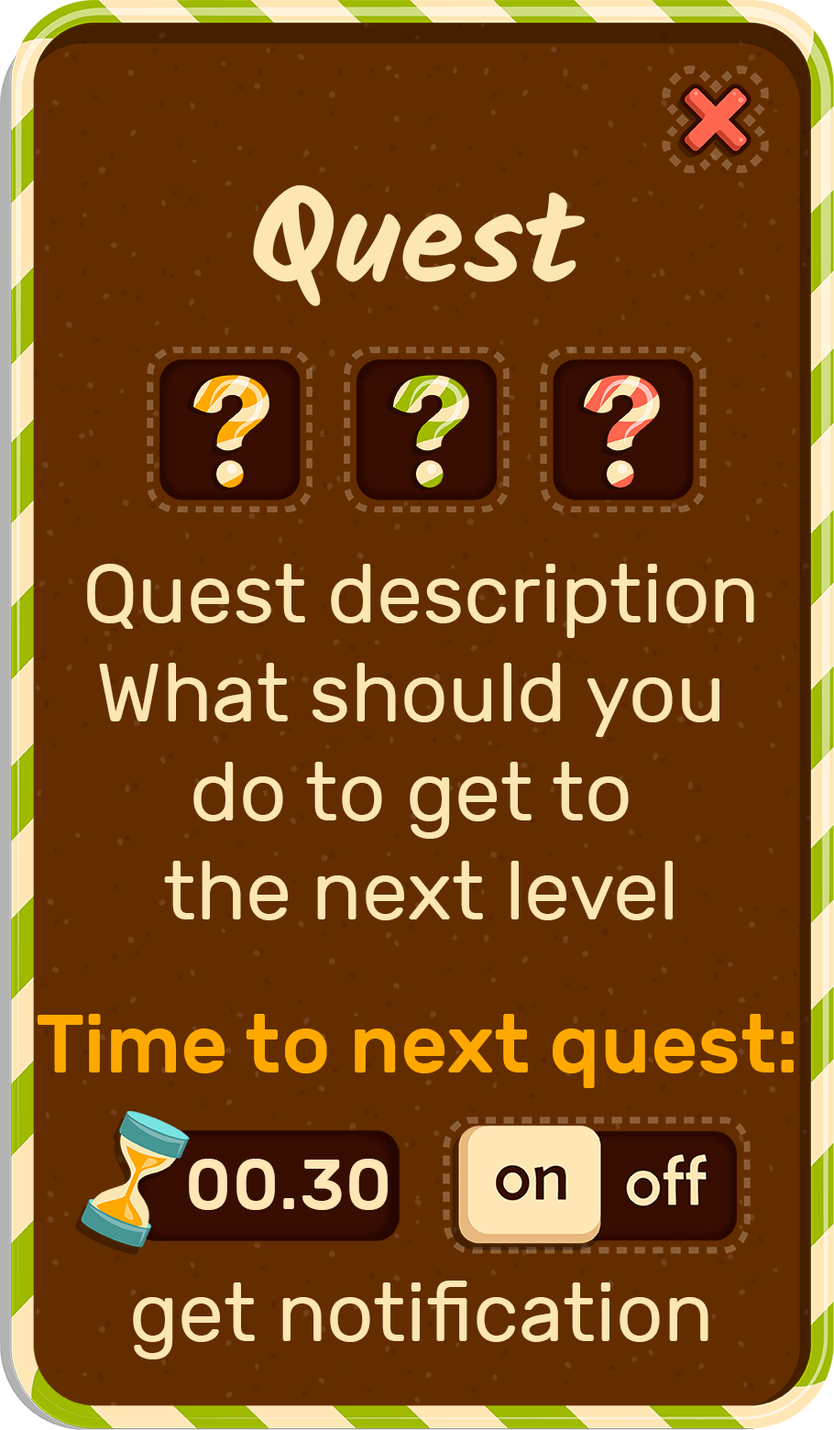
<style>
.page{position:relative;width:834px;height:1430px;background:#632d00}
.page>*{position:absolute;margin:0}
.t1{font:130.9px "Kalam-Bold";color:#fce6b2}
.t2{font:82.5px "Rubik-Regular";color:#fce6b2}
.t3{font:82.5px "Rubik-Medium";color:#ffa900}
.t4{font:70.3px "Rubik-Medium";letter-spacing:0.025em;color:#ffe6b5}
</style>
<div class="page">
<p class="t1" style="left:253px;top:185px;width:332px;height:121px">Quest</p>
<p class="t2" style="left:87px;top:564px;width:667px;height:356px;text-align:center">Quest description<br>What should you <br>do to get to <br>the next level</p>
<p class="t3" style="left:38px;top:1014px;width:756px;height:74px">Time to next quest:</p>
<p class="t4" style="left:189px;top:1158px;width:199px;height:52px">00.30</p>
<p class="t2" style="left:133px;top:1280px;width:575px;height:79px">get notification</p>
</div>
